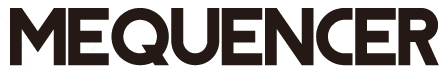
<style>
.page{position:relative;width:447px;height:73px;background:#ffffff}
.page>*{position:absolute;margin:0}
.t1{font:72px "DODGE";color:#241914}
</style>
<div class="page">
<p class="t1" style="left:10px;top:8px;width:429px;height:58px">MEQUENCER</p>
</div>
